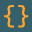
<style>
.page{position:relative;width:32px;height:32px;background:#355f6b}
.page>*{position:absolute;margin:0}
.t1{font:22.6px "Monaco";letter-spacing:0.01em;color:#fba432}
</style>
<div class="page">
<p class="t1" style="left:4px;top:5px;width:25px;height:23px">{}</p>
</div>
